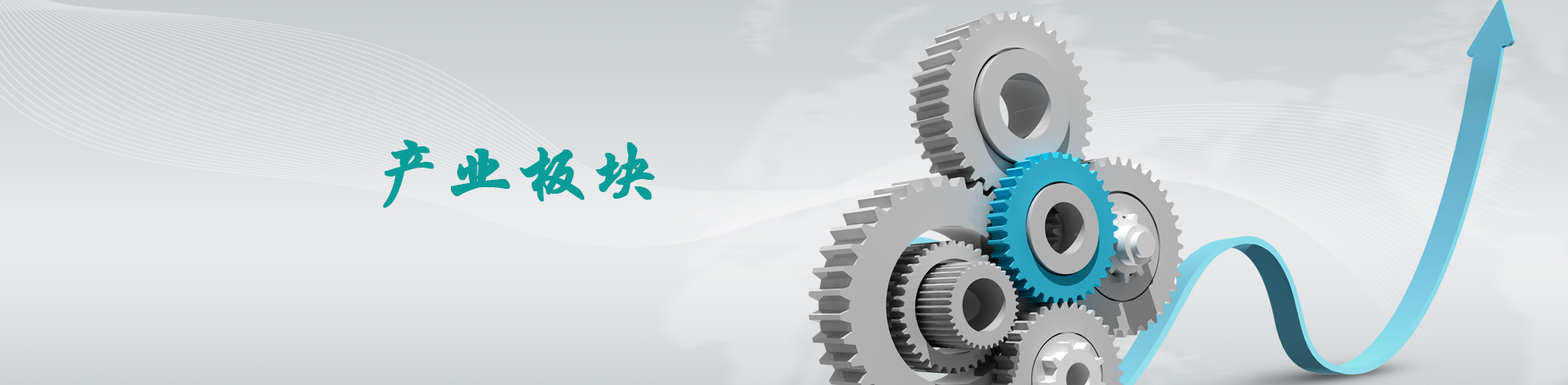
<style>
.page{position:relative;width:1568px;height:385px}
.page>*{position:absolute;margin:0}
.t1{font:70.2px "STXingkai";color:#089d99;font-weight:bold}
</style>
<div class="page">
<p class="t1" style="left:383px;top:140px;width:272px;height:67px">产业板块</p>
</div>
